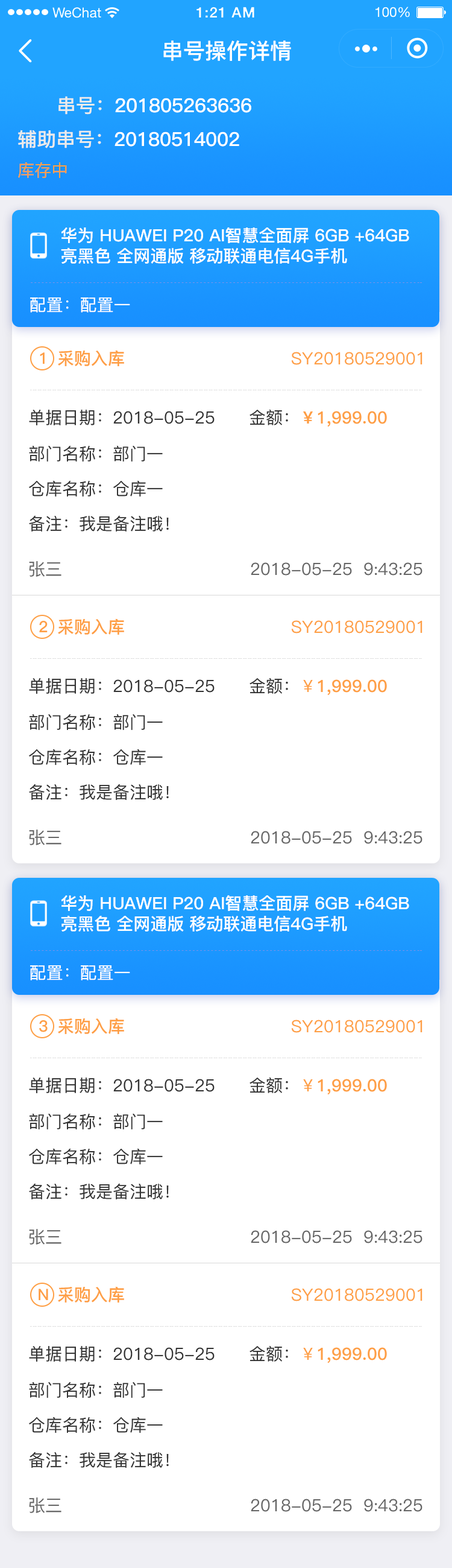
<style>
.page{position:relative;width:452px;height:1568px;background:#ffffff}
.page>*{position:absolute;margin:0}
.t1{font:21.7px "PingFang-SC-Bold";color:#ffffff}
.t2{font:19.3px "PingFang-SC-Bold";color:#ffffff}
.t3{font:19.3px "PingFang-SC-Bold";color:#ebebeb}
.t4{font:16.9px "PingFang-SC-Medium";color:#fe9f45}
.t5{font:16.9px "PingFang-SC-Bold";color:#ffffff}
.t6{font:16.9px "PingFang-SC-Medium";color:#ffffff}
.t7{font:15.7px "PingFang-SC-Bold";color:#fe9f45}
.t8{font:16.9px "PingFang-SC-Bold";color:#fe9f45}
.t9{font:16.9px "PingFang-SC-Medium";color:#333333}
.t10{font:16.9px "PingFang-SC-Medium";color:#666666}
</style>
<div class="page">
<p class="t1" style="left:163px;top:40px;width:128px;height:21px">串号操作详情</p>
<p class="t2" style="left:59px;top:96px;width:193px;height:19px"><span class="t3">串号：</span>201805263636</p>
<p class="t2" style="left:18px;top:130px;width:222px;height:18px"><span class="t3">辅助串号：</span>20180514002</p>
<p class="t4" style="left:18px;top:162px;width:49px;height:16px">库存中</p>
<p class="t5" style="left:61px;top:227px;width:349px;height:37px">华为 HUAWEI P20 AI智慧全面屏 6GB +64GB 亮黑色 全网通版 移动联通电信4G手机</p>
<p class="t6" style="left:30px;top:297px;width:100px;height:16px">配置：配置一</p>
<p class="t7" style="left:40px;top:352px;width:5px;height:12px">1</p>
<p class="t8" style="left:58px;top:350px;width:66px;height:16px">采购入库</p>
<p class="t4" style="left:291px;top:352px;width:132px;height:13px">SY20180529001</p>
<p class="t9" style="left:29px;top:410px;width:186px;height:15px">单据日期：2018-05-25</p>
<p class="t8" style="left:250px;top:410px;width:137px;height:17px"><span class="t9">金额：</span>￥1,999.00</p>
<p class="t9" style="left:29px;top:446px;width:134px;height:16px">部门名称：部门一</p>
<p class="t9" style="left:29px;top:481px;width:134px;height:16px">仓库名称：仓库一</p>
<p class="t9" style="left:29px;top:515px;width:140px;height:17px">备注：我是备注哦！</p>
<p class="t10" style="left:29px;top:561px;width:33px;height:16px">张三</p>
<p class="t10" style="left:251px;top:562px;width:172px;height:14px">2018-05-25  9:43:25</p>
<p class="t7" style="left:39px;top:621px;width:9px;height:11px">2</p>
<p class="t8" style="left:58px;top:618px;width:66px;height:17px">采购入库</p>
<p class="t4" style="left:291px;top:620px;width:132px;height:13px">SY20180529001</p>
<p class="t9" style="left:29px;top:678px;width:186px;height:16px">单据日期：2018-05-25</p>
<p class="t8" style="left:250px;top:678px;width:137px;height:18px"><span class="t9">金额：</span><span class="t4">￥</span>1,999.00</p>
<p class="t9" style="left:29px;top:714px;width:134px;height:16px">部门名称：部门一</p>
<p class="t9" style="left:29px;top:749px;width:134px;height:16px">仓库名称：仓库一</p>
<p class="t9" style="left:29px;top:784px;width:140px;height:16px">备注：我是备注哦！</p>
<p class="t10" style="left:29px;top:830px;width:33px;height:15px">张三</p>
<p class="t10" style="left:251px;top:831px;width:172px;height:13px">2018-05-25  9:43:25</p>
<p class="t5" style="left:61px;top:895px;width:349px;height:37px">华为 HUAWEI P20 AI智慧全面屏 6GB +64GB 亮黑色 全网通版 移动联通电信4G手机</p>
<p class="t6" style="left:30px;top:965px;width:100px;height:15px">配置：配置一</p>
<p class="t7" style="left:39px;top:1020px;width:9px;height:12px">3</p>
<p class="t8" style="left:58px;top:1018px;width:66px;height:16px">采购入库</p>
<p class="t4" style="left:291px;top:1020px;width:132px;height:13px">SY20180529001</p>
<p class="t9" style="left:29px;top:1078px;width:186px;height:15px">单据日期：2018-05-25</p>
<p class="t8" style="left:250px;top:1078px;width:137px;height:17px"><span class="t9">金额：</span><span class="t4">￥</span>1,999.00</p>
<p class="t9" style="left:29px;top:1114px;width:134px;height:15px">部门名称：部门一</p>
<p class="t9" style="left:29px;top:1149px;width:134px;height:15px">仓库名称：仓库一</p>
<p class="t9" style="left:29px;top:1183px;width:140px;height:16px">备注：我是备注哦！</p>
<p class="t10" style="left:29px;top:1229px;width:33px;height:16px">张三</p>
<p class="t10" style="left:251px;top:1230px;width:172px;height:13px">2018-05-25  9:43:25</p>
<p class="t7" style="left:39px;top:1289px;width:9px;height:11px">N</p>
<p class="t8" style="left:58px;top:1286px;width:66px;height:17px">采购入库</p>
<p class="t4" style="left:291px;top:1288px;width:132px;height:13px">SY20180529001</p>
<p class="t9" style="left:29px;top:1346px;width:186px;height:16px">单据日期：2018-05-25</p>
<p class="t8" style="left:250px;top:1346px;width:137px;height:17px"><span class="t9">金额：</span><span class="t4">￥</span>1,999.00</p>
<p class="t9" style="left:29px;top:1382px;width:134px;height:16px">部门名称：部门一</p>
<p class="t9" style="left:29px;top:1417px;width:134px;height:16px">仓库名称：仓库一</p>
<p class="t9" style="left:29px;top:1452px;width:140px;height:16px">备注：我是备注哦！</p>
<p class="t10" style="left:29px;top:1497px;width:33px;height:16px">张三</p>
<p class="t10" style="left:251px;top:1499px;width:172px;height:13px">2018-05-25  9:43:25</p>
</div>
